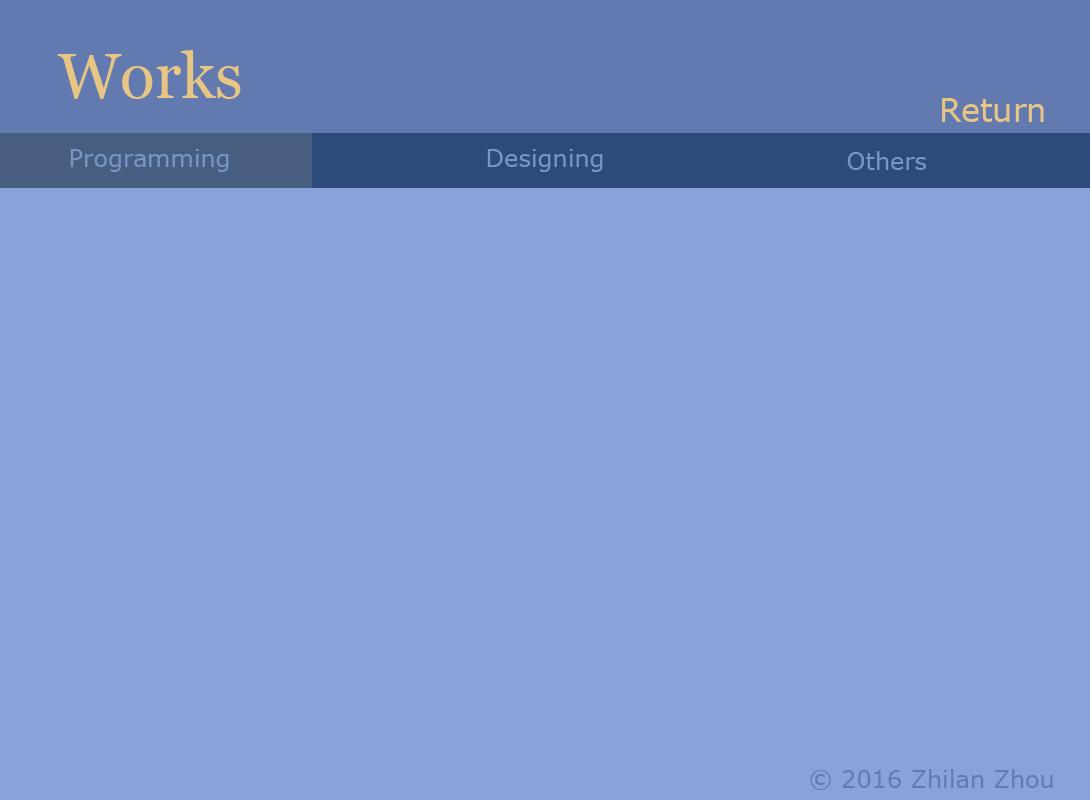
<style>
.page{position:relative;width:1090px;height:800px;background:#8aa2d9}
.page>*{position:absolute;margin:0}
.t1{font:64px "Georgia";color:#e7c683}
.t2{font:32px "Verdana";color:#e7c683}
.t3{font:24px "Verdana";color:#7895c5}
.t4{font:24px "Verdana";color:#637ab0}
</style>
<div class="page">
<p class="t1" style="left:57px;top:50px;width:184px;height:49px">Works</p>
<p class="t2" style="left:942px;top:98px;width:102px;height:24px">Return</p>
<p class="t3" style="left:70px;top:149px;width:159px;height:23px">Programming</p>
<p class="t3" style="left:487px;top:149px;width:116px;height:23px">Designing</p>
<p class="t3" style="left:847px;top:151px;width:79px;height:19px">Others</p>
<p class="t4" style="left:810px;top:769px;width:243px;height:21px">© 2016 Zhilan Zhou</p>
</div>
